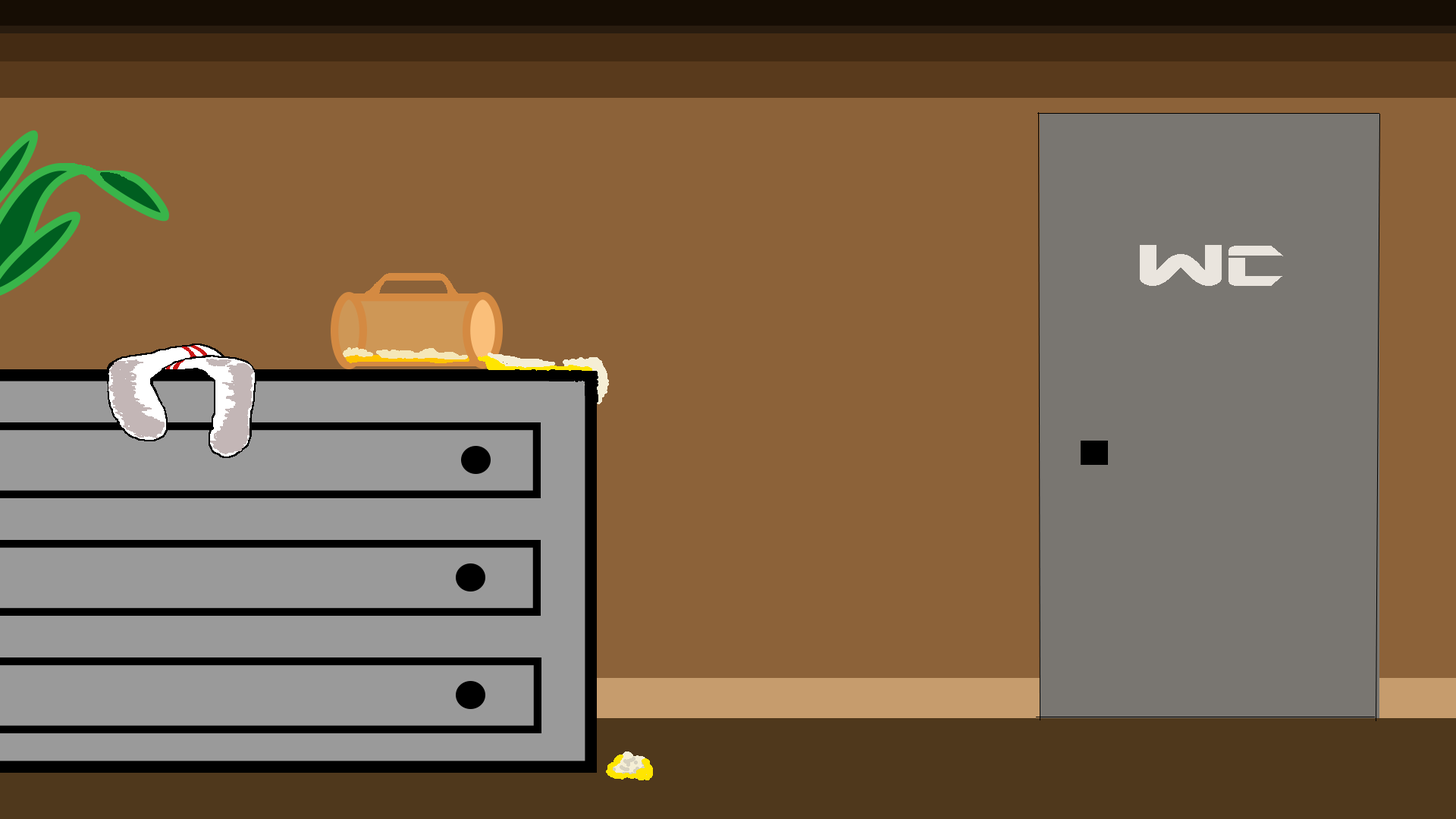
<style>
.page{position:relative;width:1456px;height:819px;background:#8c6239}
.page>*{position:absolute;margin:0}
.t1{font:64.7px "ARDESTINE";color:#eae5de;scale:1.66 1}
</style>
<div class="page">
<p class="t1" style="left:1140px;top:245px;width:143px;height:41px">WC</p>
</div>
